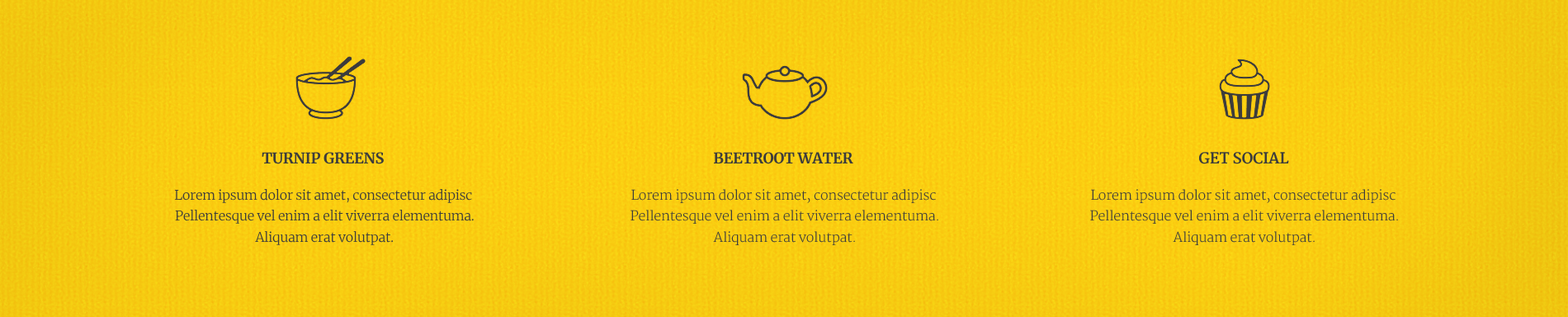
<style>
.page{position:relative;width:1568px;height:317px}
.page>*{position:absolute;margin:0}
.t1{font:14.9px "Merriweather-Bold";letter-spacing:-0.02em;color:#3c3c3c;text-transform:uppercase}
.t2{font:14.9px "Merriweather-Bold";letter-spacing:-0.02em;color:#3c3c3c}
.t3{font:13.2px/14.9px "Merriweather-Light";letter-spacing:-0.02em;color:#3c3c3c}
</style>
<div class="page">
<p class="t1" style="left:262px;top:152px;width:122px;height:12px">Turnip greens</p>
<p class="t1" style="left:713px;top:152px;width:140px;height:12px">Beetroot water</p>
<p class="t2" style="left:1199px;top:152px;width:90px;height:12px">GET SOCIAL</p>
<p class="t3" style="left:174px;top:188px;width:300px;height:57px;text-align:center">Lorem ipsum dolor sit amet, consectetur adipisc <br>Pellentesque vel enim a elit viverra elementuma.<br> Aliquam erat volutpat.</p>
<p class="t3" style="left:631px;top:189px;width:307px;height:56px;text-align:center">Lorem ipsum dolor sit amet, consectetur adipisc <br>Pellentesque vel enim a elit viverra elementuma.<br> Aliquam erat volutpat.</p>
<p class="t3" style="left:1090px;top:189px;width:308px;height:56px;text-align:center">Lorem ipsum dolor sit amet, consectetur adipisc <br>Pellentesque vel enim a elit viverra elementuma.<br> Aliquam erat volutpat.</p>
</div>
